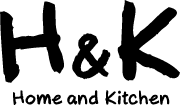
<style>
.page{position:relative;width:180px;height:105px;background:#ffffff}
.page>*{position:absolute;margin:0}
.t1{font:100px "AxureHandwriting-Bold";color:#000000}
.t2{font:60px "AxureHandwriting-Bold";color:#000000}
.t3{font:18px "AxureHandwriting-Bold";color:#000000}
</style>
<div class="page">
<p class="t1" style="left:0px;top:0px;width:180px;height:83px">H<span class="t2">&amp;</span>K</p>
<p class="t3" style="left:13px;top:90px;width:157px;height:15px">Home and Kitchen</p>
</div>
